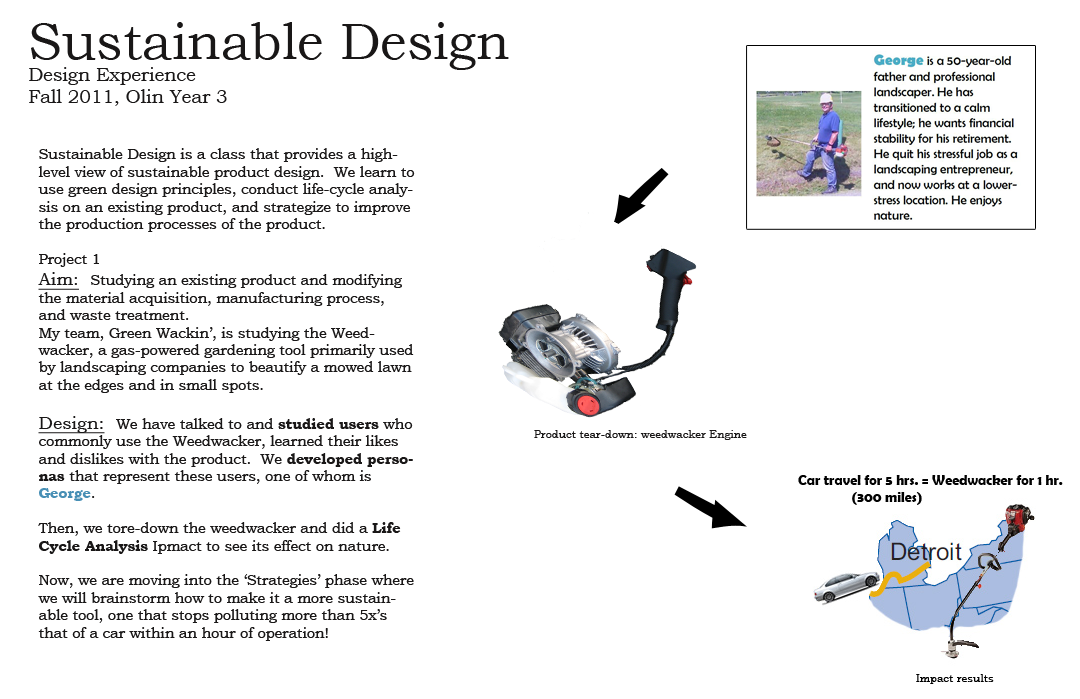
<style>
.page{position:relative;width:1080px;height:699px;background:#ffffff}
.page>*{position:absolute;margin:0}
.t1{font:18.5px "BookmanOldStyle";color:#191717}
.t2{font:50.9px "BookmanOldStyle";color:#191717}
.t3{font:14.5px "BookmanOldStyle";color:#191717}
.t4{font:18px "BookmanOldStyle";color:#191717;text-decoration:underline}
.t5{font:14.5px "BookmanOldStyle-Bold";color:#191717}
.t6{font:14.5px "BookmanOldStyle-Bold";color:#478fb5}
.t7{font:11px "BookmanOldStyle";color:#191717}
.t8{font:11px "BookmanOldStyle";color:#000000}
</style>
<div class="page">
<p class="t1" style="left:29px;top:22px;width:480px;height:84px"><span class="t2">Sustainable Design<br></span>Design Experience<br>Fall 2011, Olin Year 3</p>
<p class="t3" style="left:38px;top:148px;width:377px;height:493px">Sustainable Design is a class that provides a high-level view of sustainable product design.  We learn to use green design principles, conduct life-cycle analysis on an existing product, and strategize to improve the production processes of the product.  <br><br>Project 1<br><span class="t4">Aim:  </span>Studying an existing product and modifying the material acquisition, manufacturing process, and waste treatment.  <br>My team, Green Wackin’, is studying the Weedwacker, a gas-powered gardening tool primarily used by landscaping companies to beautify a mowed lawn at the edges and in small spots.  <br><br><span class="t4">Design:  </span>We have talked to and <span class="t5">studied users</span> who commonly use the Weedwacker, learned their likes and dislikes with the product.  We <span class="t5">developed personas </span>that represent these users, one of whom is <span class="t6">George</span>.<br><br>Then, we tore-down the weedwacker and did a <span class="t5">Life Cycle Analysis</span> Ipmact to see its effect on nature. <br><br>Now, we are moving into the ‘Strategies’ phase where we will brainstorm how to make it a more sustainable tool, one that stops polluting more than 5x’s that of a car within an hour of operation!</p>
<p class="t7" style="left:534px;top:430px;width:213px;height:10px">Product tear-down: weedwacker Engine</p>
<p class="t8" style="left:916px;top:674px;width:78px;height:10px">Impact results</p>
</div>
